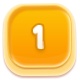
<style>
.page{position:relative;width:80px;height:80px}
.page>*{position:absolute;margin:0}
.t1{font:34.8px "Cartwheel";color:#ffffff;scale:1.03 1}
</style>
<div class="page">
<p class="t1" style="left:33px;top:25px;width:11px;height:24px">1</p>
</div>
